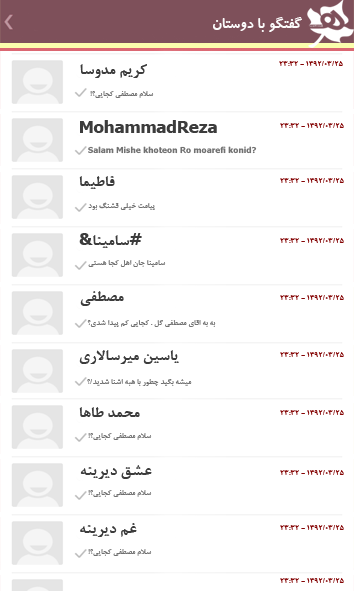
<style>
.page{position:relative;width:354px;height:591px;background:#ffffff}
.page>*{position:absolute;margin:0}
.t1{font:16.7px "BKoodakBold";color:#fafafa}
.t2{font:16.7px "BNazaninBold";color:#3c3c3c}
.t3{font:8.3px "BNazaninBold";color:#840404}
.t4{font:8.3px "BNazaninBold";color:#717171}
</style>
<div class="page">
<p class="t1" style="left:213px;top:17px;width:89px;height:15px">گفتگو با دوستان</p>
<p class="t2" style="left:80px;top:64px;width:67px;height:14px">کريم مدوسا</p>
<p class="t3" style="left:279px;top:61px;width:64px;height:5px">1392/03/25 - 23:32</p>
<p class="t4" style="left:90px;top:91px;width:64px;height:7px">سلام مصطفي کجايي؟!</p>
<p class="t2" style="left:80px;top:120px;width:137px;height:13px">MohammadReza</p>
<p class="t3" style="left:280px;top:123px;width:64px;height:5px">1392/03/25 - 23:32</p>
<p class="t4" style="left:88px;top:146px;width:169px;height:8px">Salam Mishe khoteon Ro moarefi konid?</p>
<p class="t2" style="left:79px;top:176px;width:36px;height:13px">فاطيما</p>
<p class="t3" style="left:280px;top:178px;width:64px;height:5px">1392/03/25 - 23:32</p>
<p class="t4" style="left:88px;top:202px;width:67px;height:8px">پيامت خيلي قشنگ بود</p>
<p class="t2" style="left:79px;top:233px;width:63px;height:15px">#سامينا&amp;</p>
<p class="t3" style="left:280px;top:238px;width:64px;height:5px">1392/03/25 - 23:32</p>
<p class="t4" style="left:88px;top:260px;width:78px;height:7px">سامينا جان اهل کجا هستي</p>
<p class="t2" style="left:80px;top:291px;width:44px;height:15px">مصطفي</p>
<p class="t3" style="left:280px;top:295px;width:64px;height:5px">1392/03/25 - 23:32</p>
<p class="t4" style="left:87px;top:320px;width:129px;height:7px">به به اقاي مصطفي گل . کجايي کم پيدا شدي؟</p>
<p class="t2" style="left:79px;top:350px;width:100px;height:14px">ياسين ميرسالاري</p>
<p class="t3" style="left:280px;top:352px;width:64px;height:5px">1392/03/25 - 23:32</p>
<p class="t4" style="left:87px;top:379px;width:105px;height:7px">ميشه بگيد چطور با هبه اشنا شديد/؟</p>
<p class="t2" style="left:79px;top:407px;width:61px;height:10px">محمد طاها</p>
<p class="t3" style="left:280px;top:410px;width:64px;height:5px">1392/03/25 - 23:32</p>
<p class="t4" style="left:88px;top:433px;width:64px;height:7px">سلام مصطفي کجايي؟!</p>
<p class="t2" style="left:80px;top:465px;width:72px;height:14px">عشق ديرينه</p>
<p class="t3" style="left:280px;top:470px;width:64px;height:5px">1392/03/25 - 23:32</p>
<p class="t4" style="left:88px;top:490px;width:64px;height:7px">سلام مصطفي کجايي؟!</p>
<p class="t2" style="left:80px;top:523px;width:57px;height:14px">غم ديرينه</p>
<p class="t3" style="left:280px;top:525px;width:64px;height:5px">1392/03/25 - 23:32</p>
<p class="t4" style="left:88px;top:549px;width:64px;height:7px">سلام مصطفي کجايي؟!</p>
<p class="t3" style="left:280px;top:578px;width:64px;height:5px">1392/03/25 - 23:32</p>
</div>
